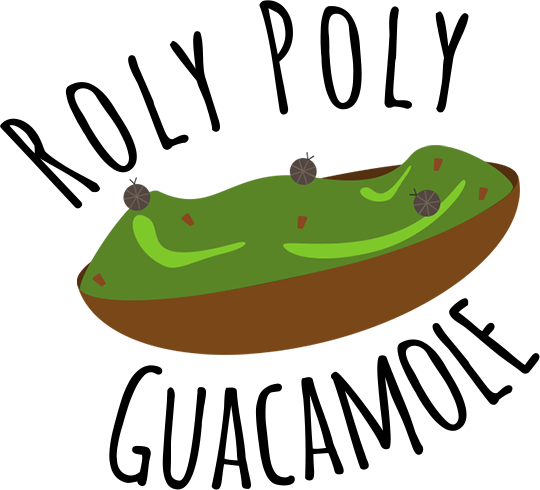
<style>
.page{position:relative;width:540px;height:490px;background:#ffffff}
.page>*{position:absolute;margin:0}
.t1{font:150px "AmaticSC-Bold";letter-spacing:0.025em;color:#000000}
</style>
<div class="page">
<p class="t1" style="left:0px;top:0px;width:469px;height:209px;rotate:5deg">Roly Poly</p>
<p class="t1" style="left:109px;top:298px;width:431px;height:192px;rotate:2deg">Guacamole</p>
</div>
